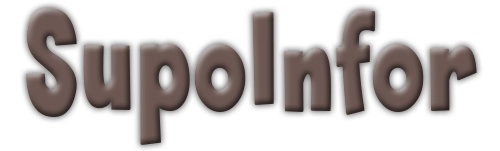
<style>
.page{position:relative;width:500px;height:151px;background:#ffffff}
.page>*{position:absolute;margin:0}
.t1{font:148.9px "SneakerheadBTNCondensed";font-weight:bold;scale:0.79 1}
</style>
<div class="page">
<p class="t1" style="left:26px;top:8px;width:451px;height:137px">SupoInfor</p>
</div>
